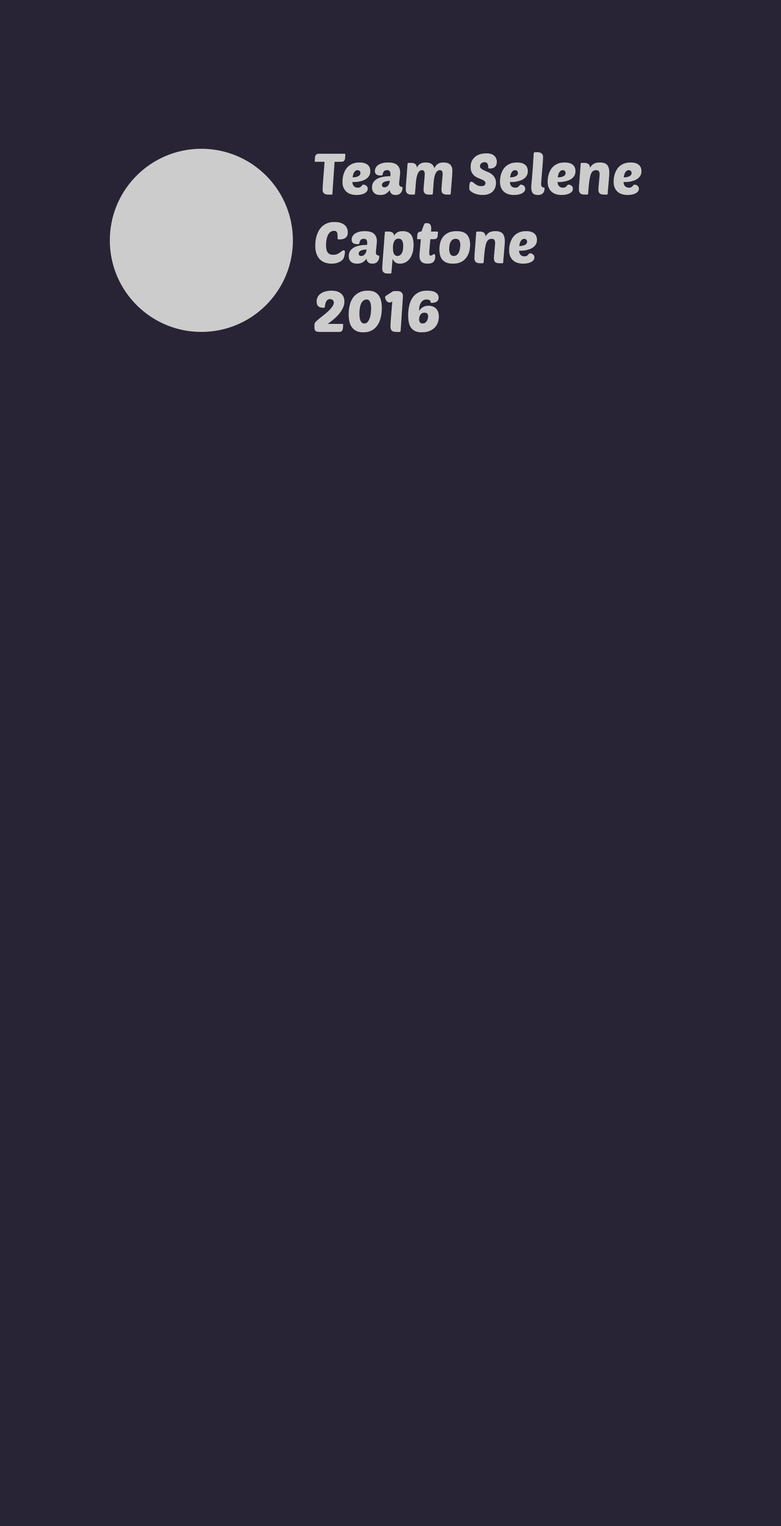
<style>
.page{position:relative;width:781px;height:1526px;background:#282435}
.page>*{position:absolute;margin:0}
.t1{font:57.2px "PoetsenOne-Regular";color:#cccccc}
</style>
<div class="page">
<p class="t1" style="left:314px;top:152px;width:328px;height:180px">Team Selene<br>Captone <br>2016</p>
</div>
